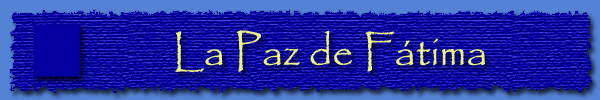
<style>
.page{position:relative;width:600px;height:100px}
.page>*{position:absolute;margin:0}
.t1{font:42px "Papyrus-Regular";color:#ecf287}
</style>
<div class="page">
<p class="t1" style="left:175px;top:30px;width:310px;height:42px">La Paz de Fátima</p>
</div>
